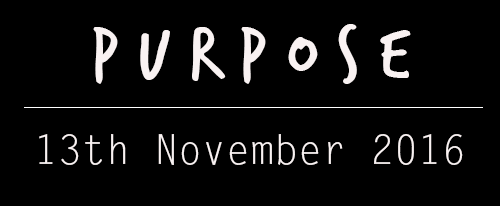
<style>
.page{position:relative;width:500px;height:206px;background:#000000}
.page>*{position:absolute;margin:0}
.t1{font:80px "TrashHand";color:#f9f2f2}
.t2{font:40px "LetterGothicStd";color:#f9f2f2}
</style>
<div class="page">
<p class="t1" style="left:93px;top:24px;width:318px;height:60px">P U R P O S E</p>
<p class="t2" style="left:39px;top:134px;width:424px;height:31px">13th November 2016</p>
</div>
